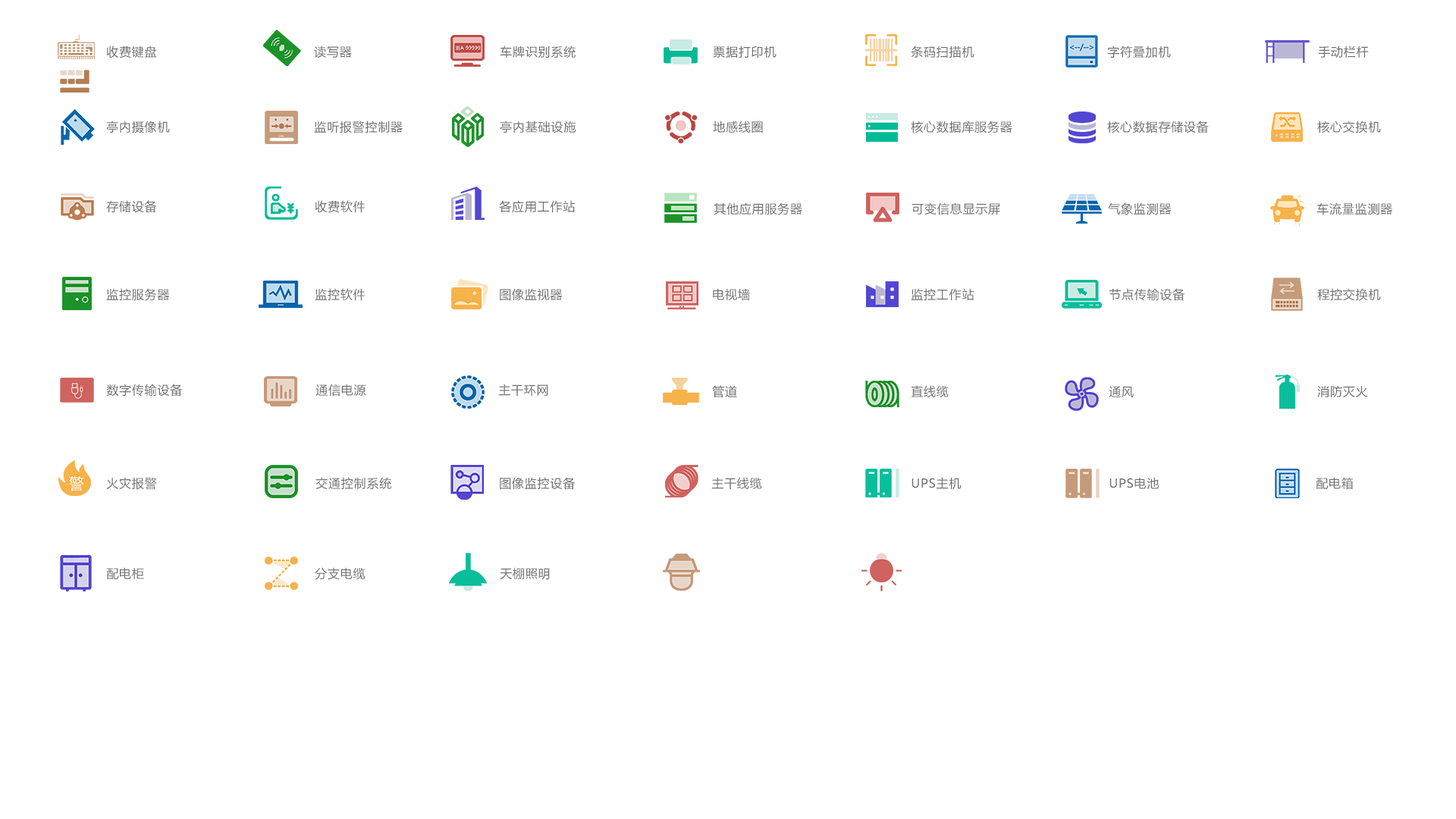
<style>
.page{position:relative;width:1456px;height:819px;background:#ffffff}
.page>*{position:absolute;margin:0}
.t1{font:12.1px "MicrosoftYaHei";letter-spacing:0.05em;color:#6f6f6f}
</style>
<div class="page">
<p class="t1" style="left:106px;top:45px;width:51px;height:13px">收费键盘</p>
<p class="t1" style="left:314px;top:45px;width:38px;height:13px">读写器</p>
<p class="t1" style="left:500px;top:45px;width:76px;height:13px">车牌识别系统</p>
<p class="t1" style="left:713px;top:45px;width:64px;height:13px">票据打印机</p>
<p class="t1" style="left:911px;top:45px;width:63px;height:13px">条码扫描机</p>
<p class="t1" style="left:1107px;top:45px;width:64px;height:13px">字符叠加机</p>
<p class="t1" style="left:1318px;top:45px;width:51px;height:13px">手动栏杆</p>
<p class="t1" style="left:106px;top:121px;width:64px;height:12px">亭内摄像机</p>
<p class="t1" style="left:314px;top:121px;width:89px;height:12px">监听报警控制器</p>
<p class="t1" style="left:500px;top:121px;width:76px;height:12px">亭内基础设施</p>
<p class="t1" style="left:713px;top:121px;width:50px;height:12px">地感线圈</p>
<p class="t1" style="left:911px;top:121px;width:101px;height:12px">核心数据库服务器</p>
<p class="t1" style="left:1107px;top:121px;width:102px;height:12px">核心数据存储设备</p>
<p class="t1" style="left:1317px;top:121px;width:64px;height:12px">核心交换机</p>
<p class="t1" style="left:106px;top:200px;width:51px;height:13px">存储设备</p>
<p class="t1" style="left:315px;top:200px;width:51px;height:13px">收费软件</p>
<p class="t1" style="left:499px;top:200px;width:77px;height:13px">各应用工作站</p>
<p class="t1" style="left:714px;top:202px;width:88px;height:13px">其他应用服务器</p>
<p class="t1" style="left:912px;top:202px;width:88px;height:13px">可变信息显示屏</p>
<p class="t1" style="left:1108px;top:202px;width:64px;height:13px">气象监测器</p>
<p class="t1" style="left:1316px;top:202px;width:76px;height:13px">车流量监测器</p>
<p class="t1" style="left:106px;top:288px;width:64px;height:13px">监控服务器</p>
<p class="t1" style="left:315px;top:288px;width:51px;height:12px">监控软件</p>
<p class="t1" style="left:500px;top:288px;width:63px;height:13px">图像监视器</p>
<p class="t1" style="left:713px;top:288px;width:37px;height:13px">电视墙</p>
<p class="t1" style="left:911px;top:288px;width:63px;height:12px">监控工作站</p>
<p class="t1" style="left:1109px;top:288px;width:76px;height:13px">节点传输设备</p>
<p class="t1" style="left:1317px;top:288px;width:64px;height:13px">程控交换机</p>
<p class="t1" style="left:106px;top:384px;width:77px;height:13px">数字传输设备</p>
<p class="t1" style="left:315px;top:384px;width:51px;height:13px">通信电源</p>
<p class="t1" style="left:498px;top:384px;width:50px;height:12px">主干环网</p>
<p class="t1" style="left:712px;top:385px;width:25px;height:12px">管道</p>
<p class="t1" style="left:911px;top:385px;width:38px;height:12px">直线缆</p>
<p class="t1" style="left:1109px;top:386px;width:25px;height:12px">通风</p>
<p class="t1" style="left:1317px;top:385px;width:51px;height:12px">消防灭火</p>
<p class="t1" style="left:106px;top:477px;width:51px;height:13px">火灾报警</p>
<p class="t1" style="left:315px;top:477px;width:76px;height:13px">交通控制系统</p>
<p class="t1" style="left:500px;top:477px;width:76px;height:13px">图像监控设备</p>
<p class="t1" style="left:711px;top:477px;width:51px;height:12px">主干线缆</p>
<p class="t1" style="left:912px;top:477px;width:50px;height:13px">UPS主机</p>
<p class="t1" style="left:1109px;top:477px;width:50px;height:12px">UPS电池</p>
<p class="t1" style="left:1316px;top:477px;width:38px;height:12px">配电箱</p>
<p class="t1" style="left:106px;top:567px;width:38px;height:12px">配电柜</p>
<p class="t1" style="left:315px;top:567px;width:51px;height:13px">分支电缆</p>
<p class="t1" style="left:500px;top:567px;width:50px;height:13px">天棚照明</p>
</div>
